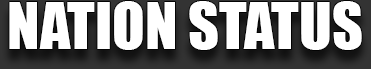
<style>
.page{position:relative;width:371px;height:69px;background:#ffffff}
.page>*{position:absolute;margin:0}
.t1{font:60px "Impact";color:#ffffff}
</style>
<div class="page">
<p class="t1" style="left:9px;top:1px;width:353px;height:49px">NATION STATUS</p>
</div>
